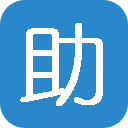
<style>
.page{position:relative;width:128px;height:128px;background:#2888cb}
.page>*{position:absolute;margin:0}
.t1{font:87.5px "YouYuan";color:#fffefe;font-weight:bold}
</style>
<div class="page">
<p class="t1" style="left:20px;top:23px;width:83px;height:83px">助</p>
</div>
